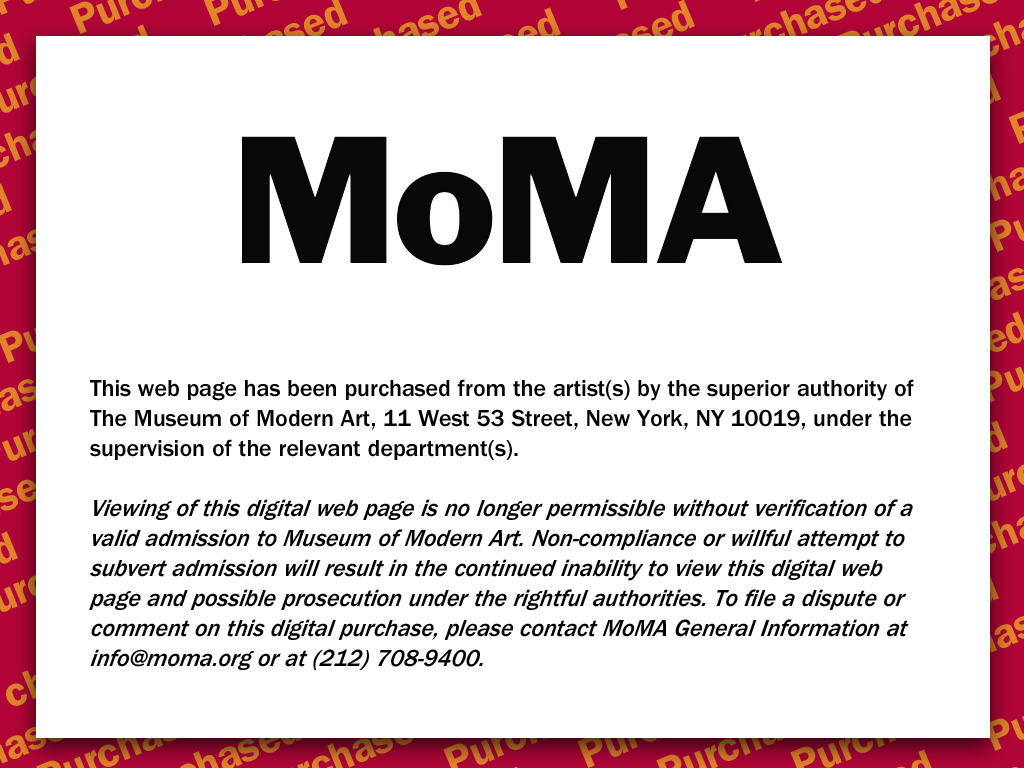
<style>
.page{position:relative;width:1024px;height:768px;background:#ffffff}
.page>*{position:absolute;margin:0}
.t1{font:24px/30px "ITCFranklinGothicStd-Med";letter-spacing:-0.005em;color:#000000}
.t2{font:24px/30px "ITCFranklinGothicStd-MedIt";letter-spacing:-0.005em;color:#000000;font-style:italic}
</style>
<div class="page">
<p class="t1" style="left:90px;top:379px;width:824px;height:81px">This web page has been purchased from the artist(s) by the superior authority of The Museum of Modern Art, 11 West 53 Street, New York, NY 10019, under the supervision of the relevant department(s).</p>
<p class="t2" style="left:89px;top:499px;width:824px;height:171px">Viewing of this digital web page is no longer permissible without verification of a valid admission to Museum of Modern Art. Non-compliance or willful attempt to subvert admission will result in the continued inability to view this digital web page and possible prosecution under the rightful authorities. To file a dispute or comment on this digital purchase, please contact MoMA General Information at info@moma.org or at (212) 708-9400.</p>
</div>
